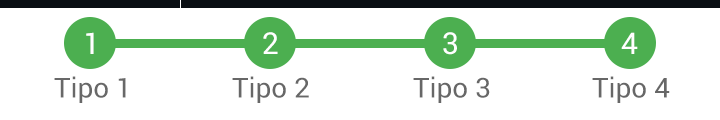
<style>
.page{position:relative;width:720px;height:120px;background:#ffffff}
.page>*{position:absolute;margin:0}
.t1{font:30px "Roboto-Regular";color:#ffffff}
.t2{font:27.5px "Roboto-Regular";color:#676767}
</style>
<div class="page">
<p class="t1" style="left:86px;top:32px;width:8px;height:22px">1</p>
<p class="t1" style="left:263px;top:32px;width:15px;height:22px">2</p>
<p class="t1" style="left:443px;top:32px;width:14px;height:23px">3</p>
<p class="t1" style="left:621px;top:32px;width:17px;height:22px">4</p>
<p class="t2" style="left:54px;top:76px;width:72px;height:27px">Tipo 1</p>
<p class="t2" style="left:232px;top:76px;width:77px;height:27px">Tipo 2</p>
<p class="t2" style="left:413px;top:76px;width:77px;height:27px">Tipo 3</p>
<p class="t2" style="left:592px;top:76px;width:78px;height:27px">Tipo 4</p>
</div>
